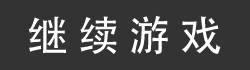
<style>
.page{position:relative;width:250px;height:70px;background:#333333}
.page>*{position:absolute;margin:0}
.t1{font:41.7px "AdobeHeitiStd-Regular";color:#ffffff}
</style>
<div class="page">
<p class="t1" style="left:28px;top:15px;width:193px;height:40px">继 续 游 戏</p>
</div>
